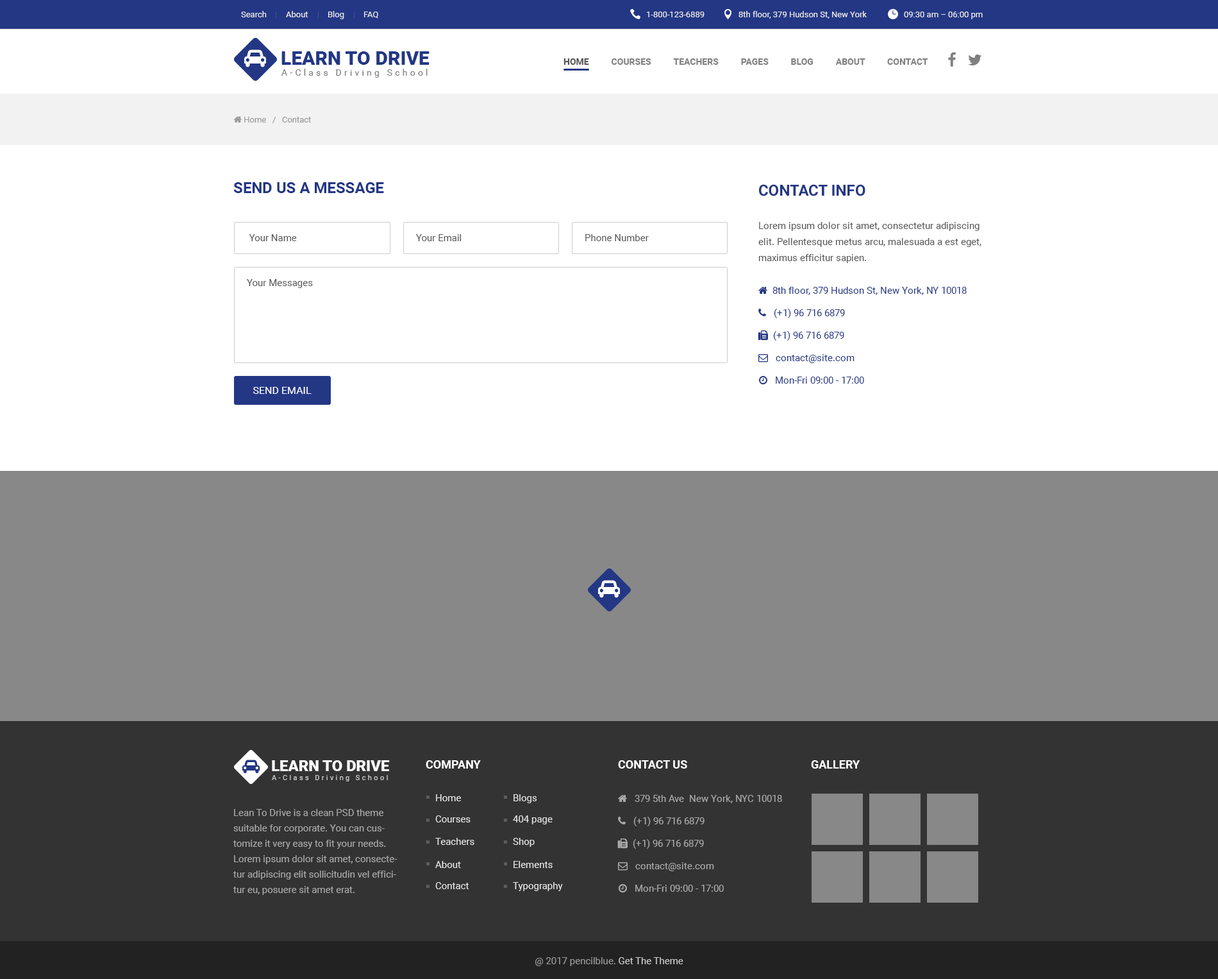
<style>
.page{position:relative;width:1218px;height:979px;background:#ffffff}
.page>*{position:absolute;margin:0}
.t1{font:8.3px "Roboto-Regular";color:#e6e6e6}
.t2{font:19.2px "Roboto-Black";color:#233785;text-transform:uppercase}
.t3{font:9px "Roboto-Bold";color:#808080;text-transform:uppercase}
.t4{font:9px "Roboto-Bold";color:#555555;text-transform:uppercase}
.t5{font:9px "Roboto-Regular";letter-spacing:0.3em;color:#808080}
.t6{font:15.4px "Roboto-Bold";color:#233785;text-transform:uppercase}
.t7{font:9.6px/16px "Roboto-Regular";color:#555555}
.t8{font:9.6px "Roboto-Regular";color:#555555}
.t9{font:10.3px "Roboto-Regular";color:#ffffff;text-transform:uppercase}
.t10{font:15.3px "Roboto-Black";color:#ffffff;text-transform:uppercase}
.t11{font:11.5px "Roboto-Bold";color:#ffffff;text-transform:uppercase}
.t12{font:7.1px "Roboto-Regular";letter-spacing:0.3em;color:#cccccc}
.t13{font:9.6px "Roboto-Regular";color:#e6e6e6}
.t14{font:9.6px/15.4px "Roboto-Regular";color:#aaaaaa}
.t15{font:9.6px "Roboto-Regular";color:#999999}
.t16{font:9.6px "Roboto-Regular";color:#cccccc}
</style>
<div class="page">
<p class="t1" style="left:241px;top:11px;width:26px;height:6px">Search</p>
<p class="t1" style="left:286px;top:11px;width:22px;height:6px">About</p>
<p class="t1" style="left:328px;top:11px;width:16px;height:8px">Blog</p>
<p class="t1" style="left:364px;top:12px;width:14px;height:7px">FAQ</p>
<p class="t1" style="left:647px;top:12px;width:58px;height:5px">1-800-123-6889</p>
<p class="t1" style="left:739px;top:11px;width:128px;height:8px">8th floor, 379 Hudson St, New York</p>
<p class="t1" style="left:904px;top:12px;width:79px;height:7px">09:30 am – 06:00 pm</p>
<p class="t2" style="left:282px;top:51px;width:148px;height:14px">Learn to Drive</p>
<p class="t3" style="left:564px;top:58px;width:365px;height:7px"><span class="t4">Home          </span>Courses          Teachers          Pages          Blog          About          Contact</p>
<p class="t5" style="left:282px;top:69px;width:146px;height:9px">A-Class Driving School</p>
<p class="t6" style="left:233px;top:182px;width:151px;height:11px">Send Us a Message</p>
<p class="t6" style="left:759px;top:184px;width:107px;height:12px">Contact Info</p>
<p class="t7" style="left:759px;top:222px;width:223px;height:41px">Lorem ipsum dolor sit amet, consectetur adipiscing elit. Pellentesque metus arcu, malesuada a est eget, maximus efficitur sapien.</p>
<p class="t8" style="left:249px;top:234px;width:48px;height:7px">Your Name</p>
<p class="t8" style="left:416px;top:234px;width:46px;height:7px">Your Email</p>
<p class="t8" style="left:586px;top:234px;width:63px;height:7px">Phone Number</p>
<p class="t8" style="left:247px;top:279px;width:66px;height:9px">Your Messages</p>
<p class="t9" style="left:253px;top:387px;width:59px;height:7px">Send EMail</p>
<p class="t10" style="left:272px;top:760px;width:118px;height:11px">Learn to Drive</p>
<p class="t11" style="left:426px;top:760px;width:55px;height:8px">Company</p>
<p class="t11" style="left:618px;top:760px;width:69px;height:8px">Contact us</p>
<p class="t11" style="left:811px;top:760px;width:50px;height:8px">Gallery</p>
<p class="t12" style="left:272px;top:775px;width:116px;height:6px">A-Class Driving School</p>
<p class="t13" style="left:436px;top:794px;width:25px;height:7px">Home</p>
<p class="t13" style="left:514px;top:794px;width:23px;height:9px">Blogs</p>
<p class="t14" style="left:233px;top:809px;width:165px;height:86px">Lean To Drive is a clean PSD theme suitable for corporate. You can customize it very easy to fit your needs. Lorem ipsum dolor sit amet, consectetur adipiscing elit sollicitudin vel efficitur eu, posuere sit amet erat.</p>
<p class="t13" style="left:435px;top:815px;width:36px;height:7px">Courses</p>
<p class="t13" style="left:513px;top:815px;width:40px;height:9px">404 page</p>
<p class="t13" style="left:435px;top:838px;width:40px;height:7px">Teachers</p>
<p class="t13" style="left:513px;top:838px;width:22px;height:9px">Shop</p>
<p class="t13" style="left:435px;top:861px;width:26px;height:7px">About</p>
<p class="t13" style="left:514px;top:861px;width:39px;height:7px">Elements</p>
<p class="t13" style="left:435px;top:882px;width:34px;height:7px">Contact</p>
<p class="t13" style="left:513px;top:882px;width:50px;height:9px">Typography</p>
<p class="t15" style="left:535px;top:957px;width:149px;height:9px">@ 2017 pencilblue. <span class="t16">Get The Theme</span></p>
</div>
